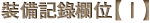
<style>
.page{position:relative;width:150px;height:23px;background:#ffffff}
.page>*{position:absolute;margin:0}
.t1{font:18px "GothicMB101Pr6N-Medium";font-weight:bold}
</style>
<div class="page">
<p class="t1" style="left:1px;top:1px;width:111px;height:18px">裝備記錄欄位</p>
</div>
